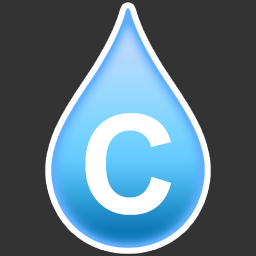
<style>
.page{position:relative;width:256px;height:256px;background:#333333}
.page>*{position:absolute;margin:0}
.t1{font:136.9px "Arial-BoldMT";color:#ffffff}
</style>
<div class="page">
<p class="t1" style="left:85px;top:113px;width:86px;height:102px">C</p>
</div>
